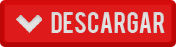
<style>
.page{position:relative;width:176px;height:47px;background:#de1a1a}
.page>*{position:absolute;margin:0}
.t1{font:24px "Bebas";color:#dcdcdc}
</style>
<div class="page">
<p class="t1" style="left:51px;top:12px;width:114px;height:21px">descargar</p>
</div>
